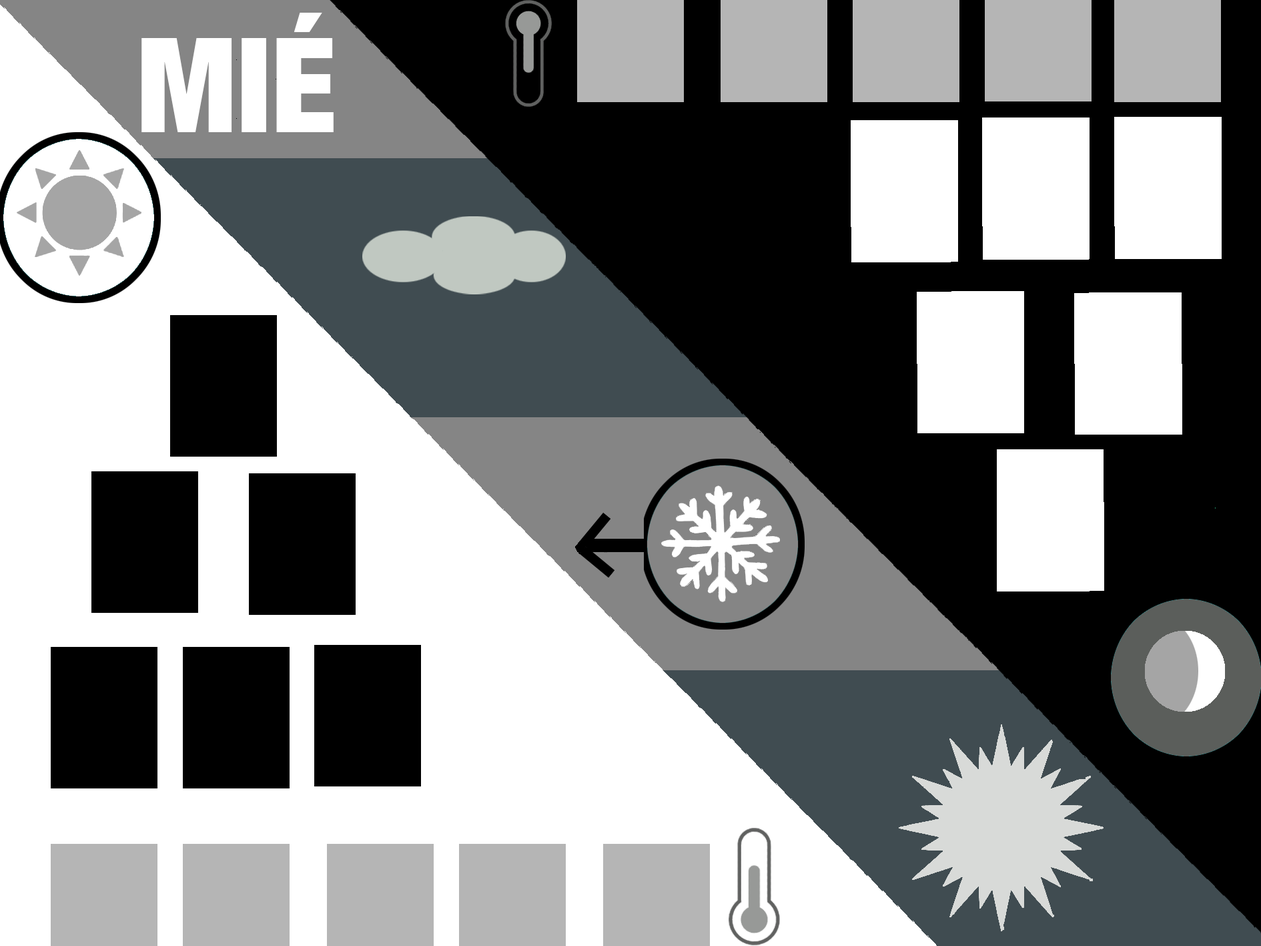
<style>
.page{position:relative;width:1261px;height:946px;background:#ffffff}
.page>*{position:absolute;margin:0}
.t1{font:131.6px "HelveticaNeue-CondensedBlack";color:#ffffff}
</style>
<div class="page">
<p class="t1" style="left:141px;top:13px;width:193px;height:119px">MIÉ</p>
</div>
